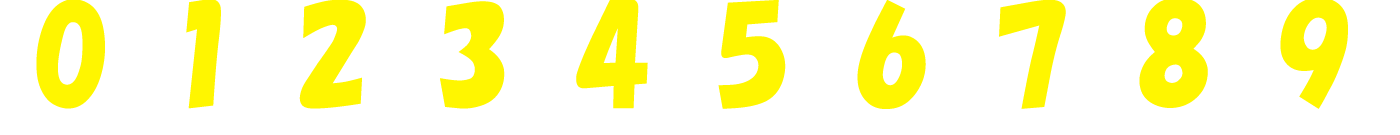
<style>
.page{position:relative;width:1400px;height:135px;background:#ffffff}
.page>*{position:absolute;margin:0}
.t1{font:120px "HGSSoeiKakupoptai";color:#fff600}
</style>
<div class="page">
<p class="t1" style="left:36px;top:0px;width:69px;height:109px">0</p>
<p class="t1" style="left:186px;top:0px;width:35px;height:109px">1</p>
<p class="t1" style="left:299px;top:0px;width:67px;height:109px">2</p>
<p class="t1" style="left:440px;top:1px;width:65px;height:108px">3</p>
<p class="t1" style="left:576px;top:0px;width:72px;height:109px">4</p>
<p class="t1" style="left:718px;top:0px;width:68px;height:109px">5</p>
<p class="t1" style="left:857px;top:0px;width:69px;height:109px">6</p>
<p class="t1" style="left:999px;top:0px;width:67px;height:109px">7</p>
</div>
